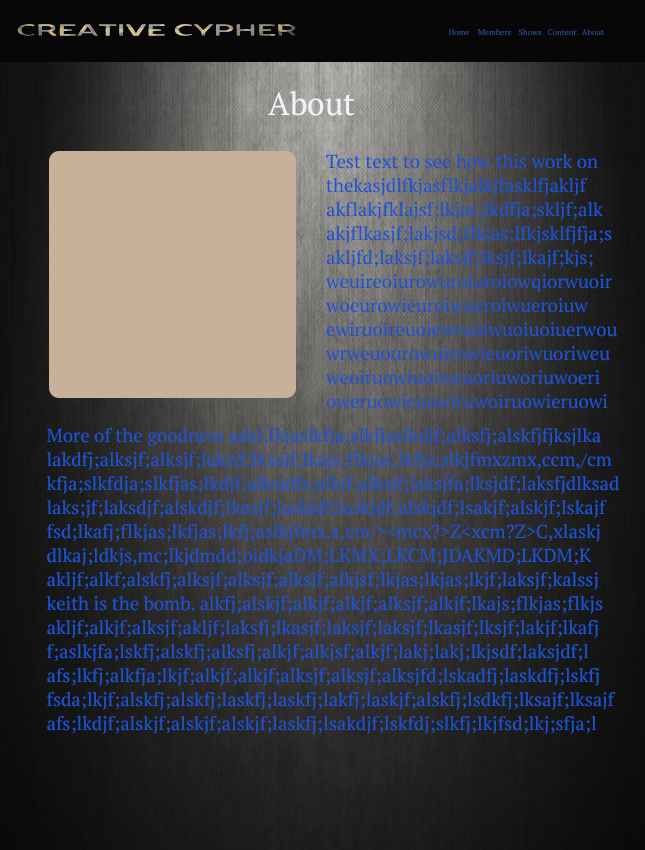
<style>
.page{position:relative;width:645px;height:850px}
.page>*{position:absolute;margin:0}
.t1{font:8px "PTSerif-Regular"}
.t2{font:8px "PTSerif-Regular";color:#2a4f99}
.t3{font:32px "PTSerif-Regular";color:#f0f3f8}
.t4{font:18.7px/24px "PTSerif-Regular";color:#1b53d1}
</style>
<div class="page">
<p class="t1" style="left:448px;top:29px;width:21px;height:6px">Home</p>
<p class="t1" style="left:478px;top:29px;width:33px;height:6px">Members</p>
<p class="t1" style="left:519px;top:29px;width:23px;height:6px">Shows</p>
<p class="t1" style="left:548px;top:29px;width:29px;height:6px">Content</p>
<p class="t2" style="left:582px;top:29px;width:22px;height:6px">About</p>
<p class="t3" style="left:268px;top:91px;width:87px;height:25px">About</p>
<p class="t4" style="left:325px;top:154px;width:292px;height:255px">Test text to see how this work on <br>thekasjdlfkjasflkjalkjfasklfjakljf<br>akflakjfklajsf;lkjas;lkdfja;skljf;alk<br>akjflkasjf;lakjsd;flkjas;lfkjsklfjfja;s<br>akljfd;laksjf;laksjf;lksjf;lkajf;kjs;<br>weuireoiurowuroiuroiowqiorwuoir<br>woeurowieuroiwueroiwueroiuw<br>ewiruoireuoiewruoiwuoiuoiuerwou<br>wrweuourowuirowieuoriwuoriweu<br>weoiruowiuoiweuoriuworiuwoeri<br>oweruowieuowiruwoiruowieruowi</p>
<p class="t4" style="left:46px;top:428px;width:573px;height:306px">More of the goodness adsl;fkjaslkfja;slkfjaslkdjf;alksfj;alskfjfjksjlka<br>lakdfj;alksjf;alksjf;laksjf;lksajf;lkajs;flkjas;lkfja;slkjfmxzmx,ccm,/cm<br>kfja;slkfdja;slkfjas;lkdjf;alksjdfs;alkjf;alksjf;laksjfa;lksjdf;laksfjdlksad<br>laks;jf;laksdjf;alskdjf;lkasjf;laskjdf;laskjdf;alskjdf;lsakjf;alskjf;lskajf<br>fsd;lkafj;flkjas;lkfjas;lkfj;aslkjfmx.z,cm/&gt;&lt;mcx?&gt;Z&lt;xcm?Z&gt;C,xlaskj<br>dlkaj;ldkjs,mc;lkjdmdd;oidkjaDM;LKMX;LKCM;JDAKMD;LKDM;K<br>akljf;alkf;alskfj;alksjf;alksjf;alksjf;alkjsf;lkjas;lkjas;lkjf;laksjf;kalssj<br>keith is the bomb. alkfj;alskjf;alkjf;alkjf;alksjf;alkjf;lkajs;flkjas;flkjs<br>akljf;alkjf;alksjf;akljf;laksfj;lkasjf;laksjf;laksjf;lkasjf;lksjf;lakjf;lkafj<br>f;aslkjfa;lskfj;alskfj;alksfj;alkjf;alkjsf;alkjf;lakj;lakj;lkjsdf;laksjdf;l<br>afs;lkfj;alkfja;lkjf;alkjf;alkjf;alksjf;alksjf;alksjfd;lskadfj;laskdfj;lskfj<br>fsda;lkjf;alskfj;alskfj;laskfj;laskfj;lakfj;laskjf;alskfj;lsdkfj;lksajf;lksajf<br>afs;lkdjf;alskjf;alskjf;alskjf;laskfj;lsakdjf;lskfdj;slkfj;lkjfsd;lkj;sfja;l</p>
</div>
